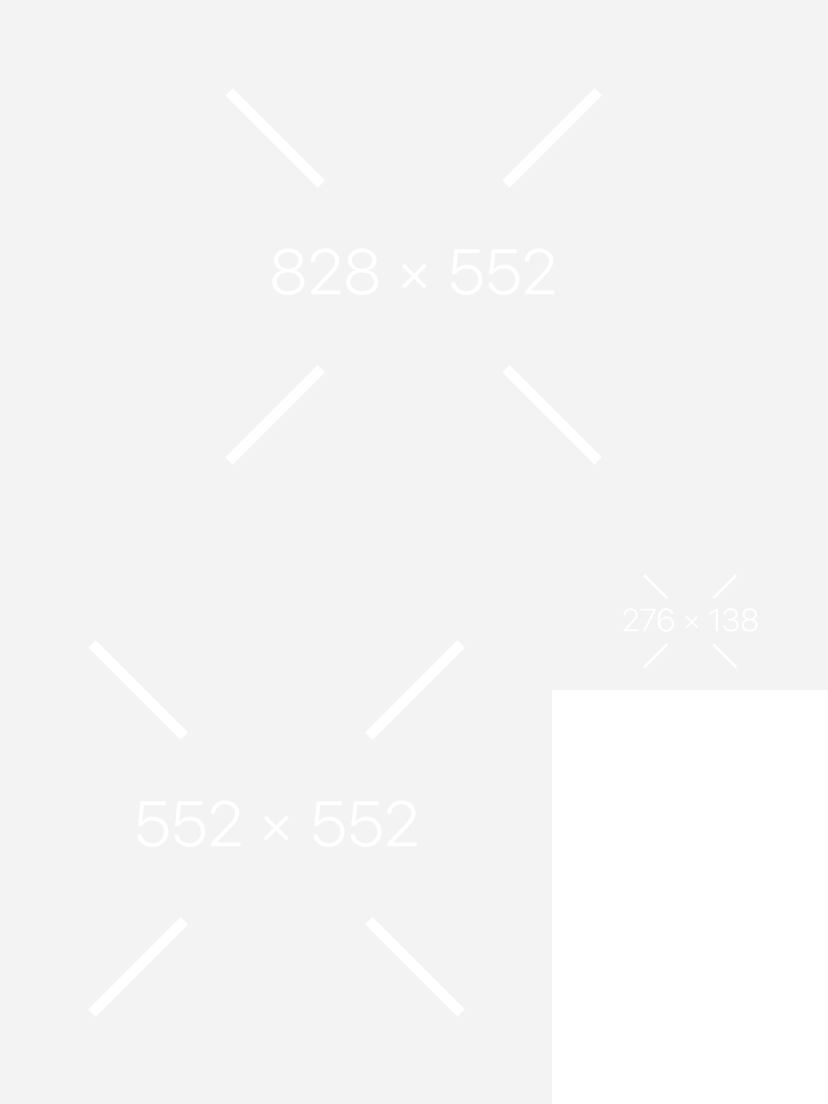
<style>
.page{position:relative;width:828px;height:1104px;background:#f3f3f3}
.page>*{position:absolute;margin:0}
.t1{font:64px "SFUIDisplay-Light";color:#ffffff}
.t2{font:32px "SFUIDisplay-Light";color:#ffffff}
</style>
<div class="page">
<p class="t1" style="left:272px;top:248px;width:283px;height:47px">828 × 552</p>
<p class="t2" style="left:623px;top:608px;width:135px;height:24px">276 × 138</p>
<p class="t1" style="left:137px;top:800px;width:280px;height:47px">552 × 552</p>
</div>
